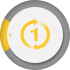
<style>
.page{position:relative;width:70px;height:70px;background:#f2f2f2}
.page>*{position:absolute;margin:0}
.t1{font:18px "HelveticaRoundedLT-Bold";color:#fbc830;scale:1.24 1}
</style>
<div class="page">
<p class="t1" style="left:30px;top:28px;width:8px;height:13px">1</p>
</div>
